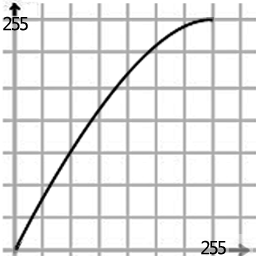
<style>
.page{position:relative;width:256px;height:256px;background:#ffffff}
.page>*{position:absolute;margin:0}
.t1{font:18px "MalgunGothicRegular";color:#000000}
</style>
<div class="page">
<p class="t1" style="left:3px;top:16px;width:25px;height:15px">255</p>
<p class="t1" style="left:201px;top:240px;width:25px;height:15px">255</p>
</div>
